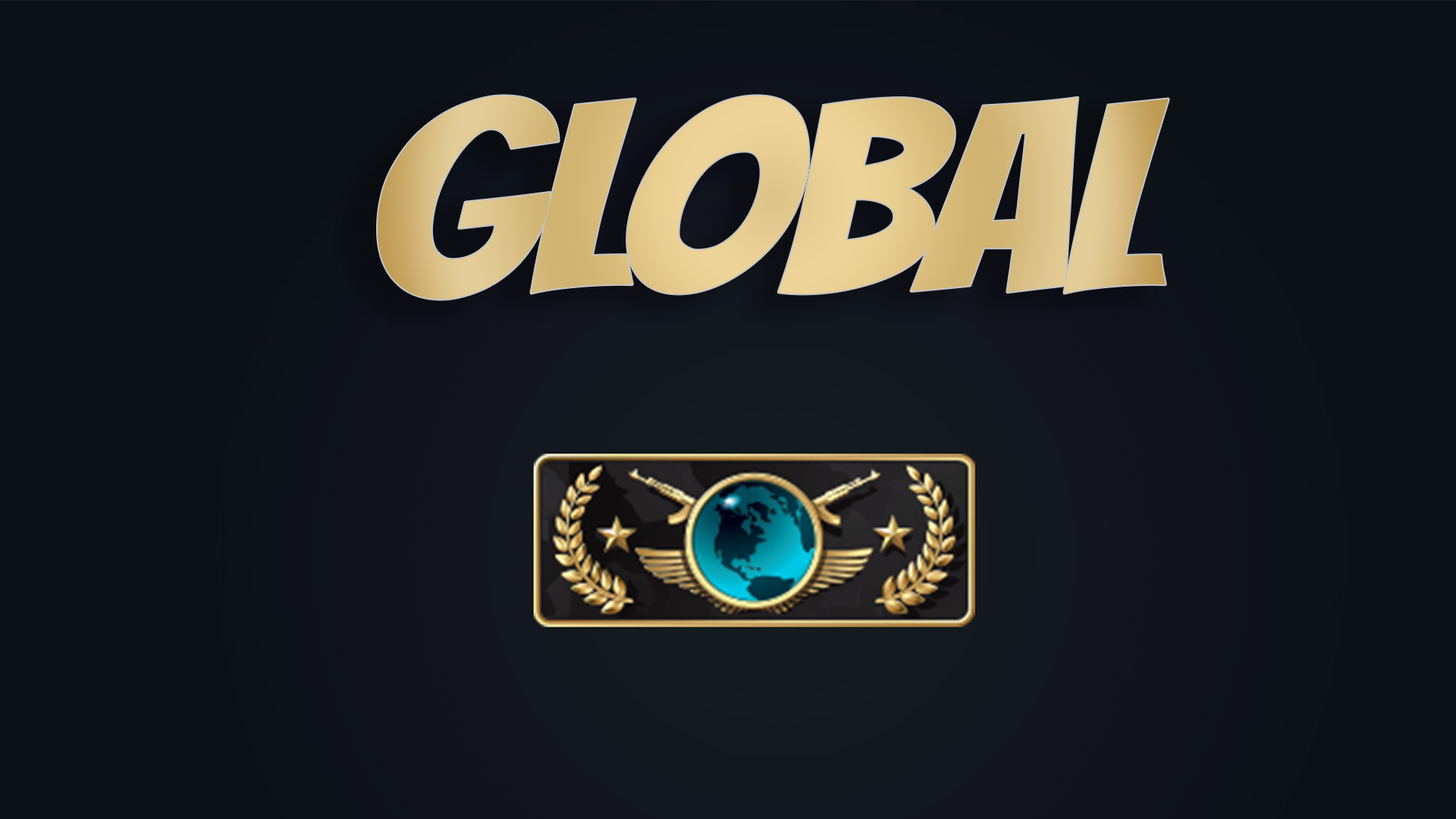
<style>
.page{position:relative;width:1456px;height:819px;background:#0c1115}
.page>*{position:absolute;margin:0}
.t1{font:263.3px "Bangers-Regular";letter-spacing:-0.02em;color:#dec58a;text-transform:uppercase;scale:1.3 1}
</style>
<div class="page">
<p class="t1" style="left:378px;top:96px;width:791px;height:204px">Global</p>
</div>
